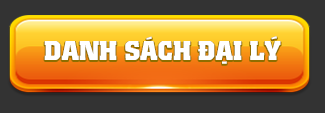
<style>
.page{position:relative;width:325px;height:113px;background:#333333}
.page>*{position:absolute;margin:0}
.t1{font:27px "UTM-Colossalis";color:#ffffff}
</style>
<div class="page">
<p class="t1" style="left:44px;top:36px;width:237px;height:28px">DANH SÁCH ĐẠI LÝ</p>
</div>
